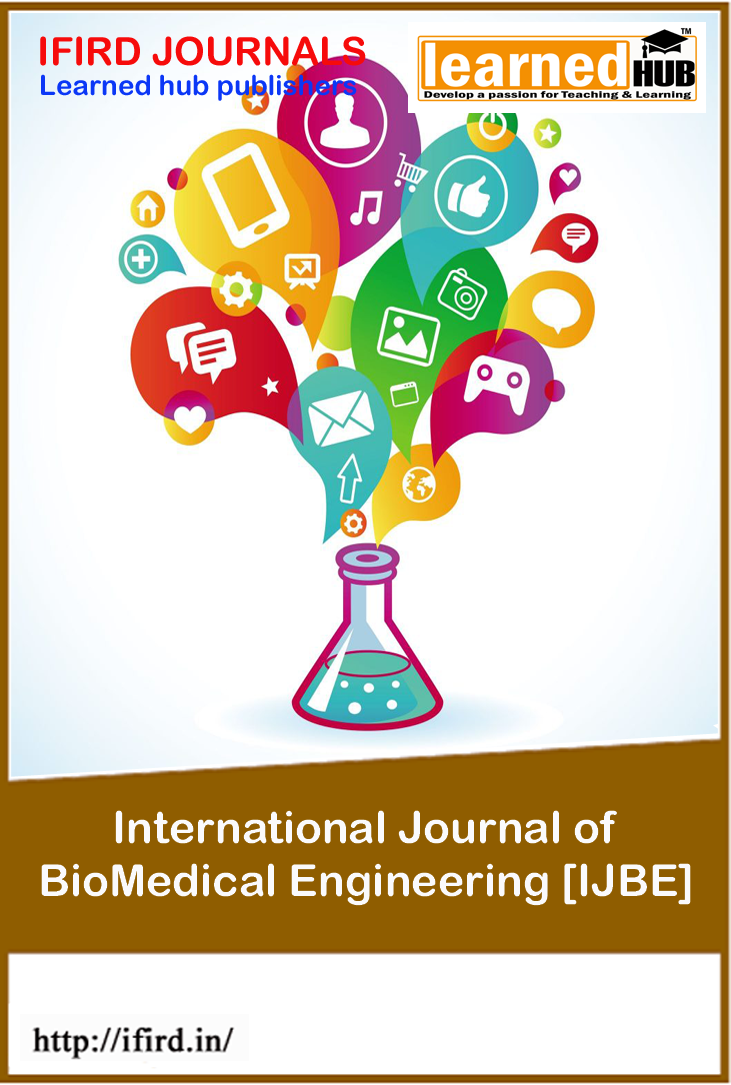
<style>
.page{position:relative;width:731px;height:1085px;background:#ffffff}
.page>*{position:absolute;margin:0}
.t1{font:38.9px "ArialRoundedMTBold";color:#f60b0b}
.t2{font:27.8px "ArialRoundedMTBold";color:#0b37f6}
.t3{font:44.4px "ArialRoundedMTBold";color:#fafafc}
</style>
<div class="page">
<p class="t1" style="left:40px;top:36px;width:326px;height:30px">IFIRD JOURNALS</p>
<p class="t2" style="left:41px;top:74px;width:316px;height:27px">Learned hub publishers</p>
<p class="t3" style="left:41px;top:810px;width:650px;height:96px;text-align:center">International Journal of <br>BioMedical Engineering [IJBE]</p>
</div>
